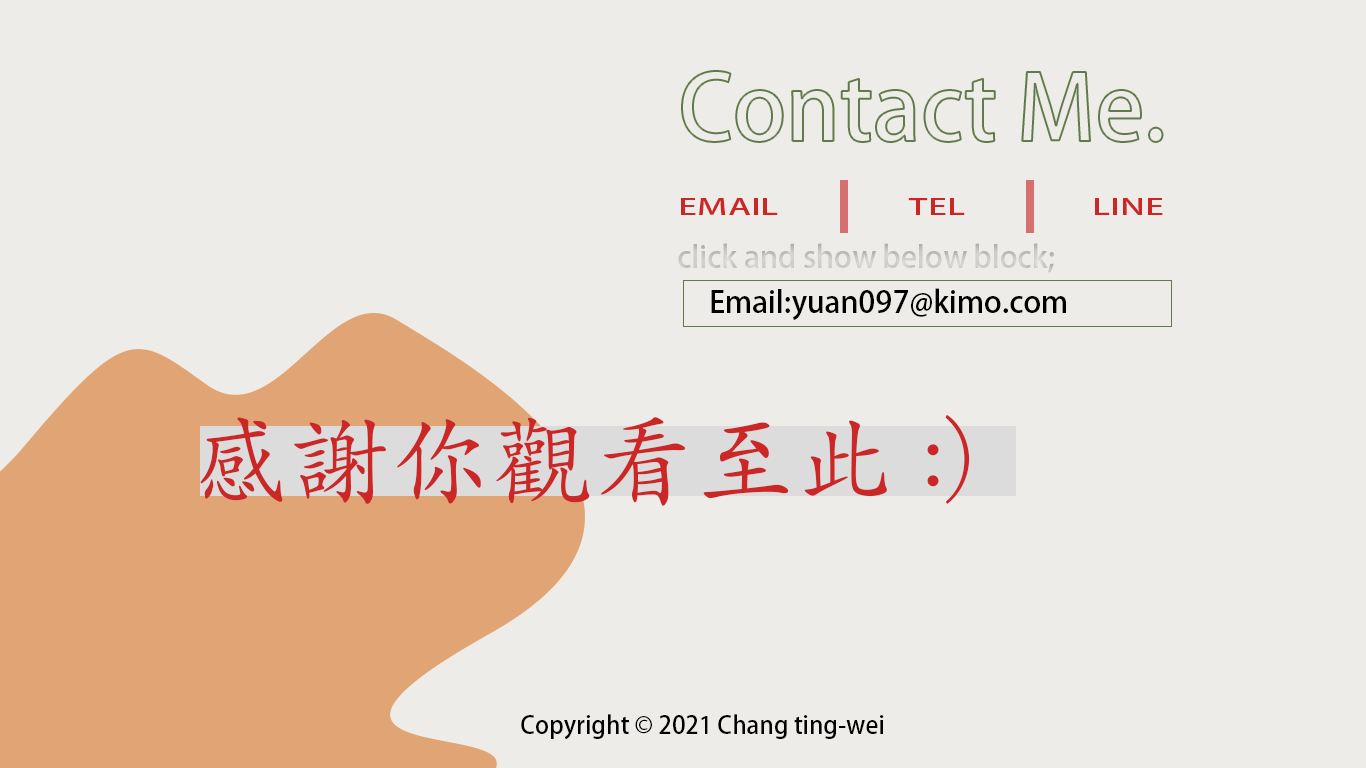
<style>
.page{position:relative;width:1366px;height:768px;background:#eeece8}
.page>*{position:absolute;margin:0}
.t1{font:21.8px "AdobeFanHeitiStd-Bold";color:#cb2727;scale:1.6 1}
.t2{font:30px "AdobeFanHeitiStd-Bold";color:#cacbca}
.t3{font:30px "AdobeFanHeitiStd-Bold";color:#000000}
.t4{font:101px "STKaitiTC-Regular";color:#cb2727}
.t5{font:24px "AdobeFanHeitiStd-Bold";color:#000000}
</style>
<div class="page">
<p class="t1" style="left:681px;top:198px;width:97px;height:17px">EMAIL</p>
<p class="t1" style="left:908px;top:198px;width:57px;height:17px">TEL</p>
<p class="t1" style="left:1095px;top:198px;width:68px;height:17px">LINE</p>
<p class="t2" style="left:678px;top:243px;width:376px;height:30px">click and show below block;</p>
<p class="t3" style="left:711px;top:288px;width:355px;height:32px">Email:yuan097@kimo.com</p>
<p class="t4" style="left:200px;top:414px;width:770px;height:92px">感謝你觀看至此:)</p>
<p class="t5" style="left:521px;top:714px;width:363px;height:26px">Copyright © 2021 Ｃhang ting-wei</p>
</div>
